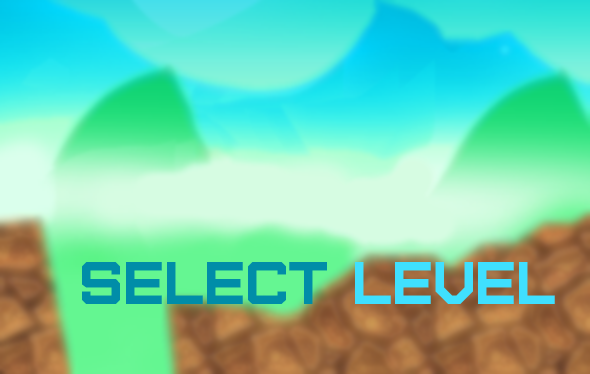
<style>
.page{position:relative;width:590px;height:374px}
.page>*{position:absolute;margin:0}
.t1{font:60px "Furore";color:#008da8}
.t2{font:60px "Furore";color:#3fe0ff}
</style>
<div class="page">
<p class="t1" style="left:82px;top:262px;width:473px;height:42px">SELECT<span class="t2"> LEVEL</span></p>
</div>
